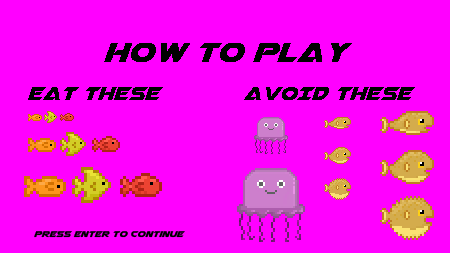
<style>
.page{position:relative;width:450px;height:253px;background:#ff00ff}
.page>*{position:absolute;margin:0}
.t1{font:36px "Airstrike";color:#000000}
.t2{font:24px "Airstrike";color:#000000}
.t3{font:11px "Airstrike";color:#000000}
</style>
<div class="page">
<p class="t1" style="left:104px;top:43px;width:248px;height:19px">HOW TO PLAY</p>
<p class="t2" style="left:28px;top:87px;width:135px;height:13px">EAT THESE</p>
<p class="t2" style="left:244px;top:87px;width:171px;height:13px">AVOID THESE</p>
<p class="t3" style="left:34px;top:231px;width:151px;height:7px">press enter to continue</p>
</div>
